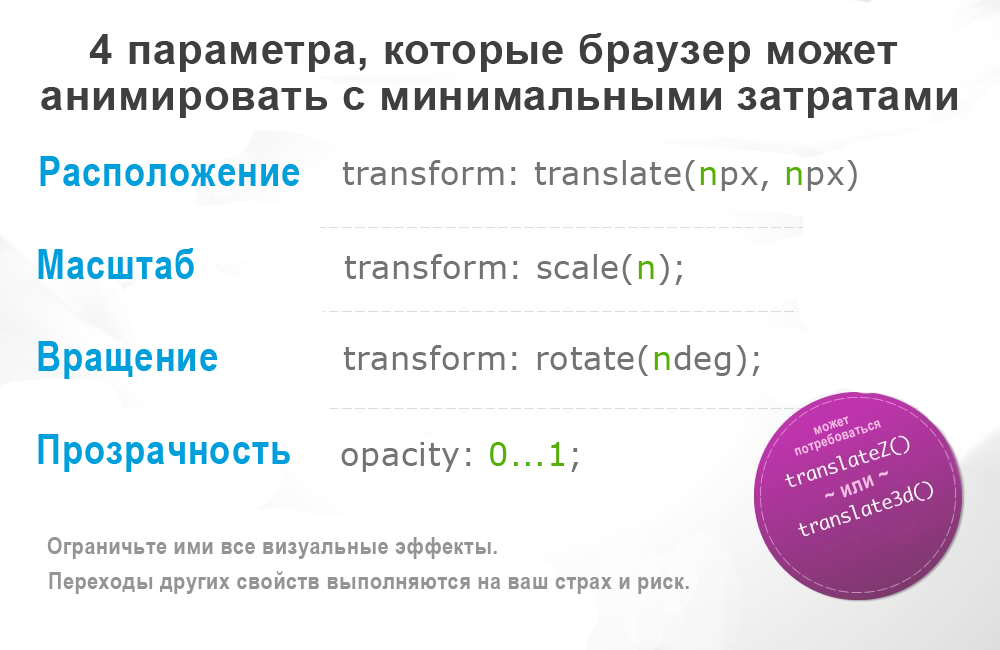
<style>
.page{position:relative;width:1000px;height:650px;background:#ffffff}
.page>*{position:absolute;margin:0}
.t1{font:42px/46px "Arial-BoldMT";letter-spacing:0.025em;color:#3f3f3f}
.t2{font:42px "ArialNarrow-Bold";letter-spacing:0.025em;color:#009fdb}
.t3{font:32px "Verdana";letter-spacing:0.025em;color:#737373}
.t4{font:32px "Verdana";letter-spacing:0.025em;color:#56af06}
.t5{font:14px/14px "ArialNarrow-Bold";letter-spacing:0.025em;color:#f4bde4}
.t6{font:22px "ArialNarrow-Bold";letter-spacing:0.025em;color:#f4bde4}
.t7{font:24px "ArialNarrow-Bold";letter-spacing:0.025em;color:#949494}
</style>
<div class="page">
<p class="t1" style="left:41px;top:33px;width:916px;height:85px;text-align:center">4 параметра, которые браузер может <br>анимировать с минимальными затратами</p>
<p class="t2" style="left:40px;top:156px;width:260px;height:30px">Расположение</p>
<p class="t3" style="left:342px;top:160px;width:515px;height:31px">transform: translate(<span class="t4">n</span>px, <span class="t4">n</span>px)</p>
<p class="t2" style="left:38px;top:248px;width:156px;height:31px">Масштаб</p>
<p class="t3" style="left:344px;top:254px;width:339px;height:31px">transform: scale(<span class="t4">n</span>);</p>
<p class="t2" style="left:38px;top:341px;width:180px;height:38px">Вращение</p>
<p class="t3" style="left:343px;top:345px;width:417px;height:31px">transform: rotate(<span class="t4">n</span>deg);</p>
<p class="t5" style="left:794px;top:416px;width:87px;height:40px;text-align:center;rotate:-19deg">может <br>потребоваться</p>
<p class="t2" style="left:38px;top:434px;width:252px;height:38px">Прозрачность</p>
<p class="t3" style="left:341px;top:442px;width:238px;height:30px">opacity:<span class="t4"> 0...1</span>;</p>
<p class="t6" style="left:825px;top:470px;width:63px;height:29px;rotate:-21deg">~ или ~</p>
<p class="t7" style="left:47px;top:537px;width:450px;height:22px">Ограничьте ими все визуальные эффекты.</p>
<p class="t7" style="left:49px;top:571px;width:640px;height:23px">Переходы других свойств выполняются на ваш страх и риск.</p>
</div>
